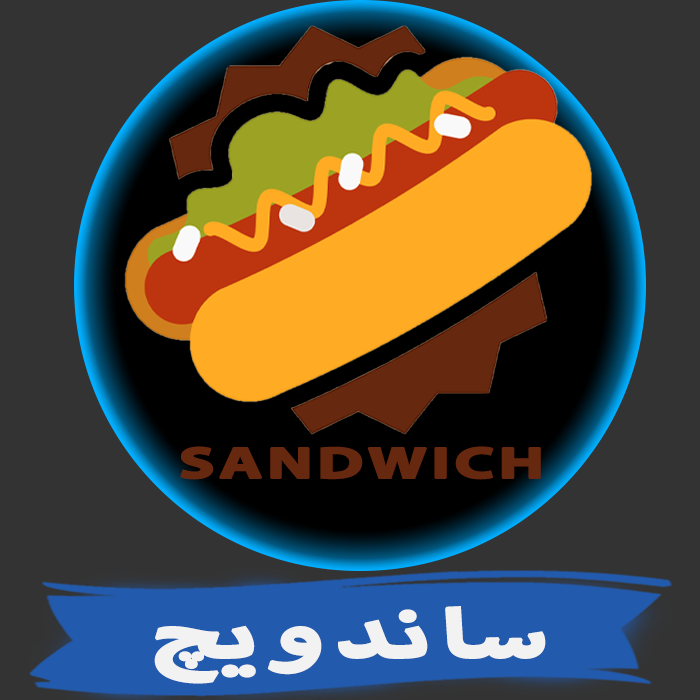
<style>
.page{position:relative;width:700px;height:700px;background:#333333}
.page>*{position:absolute;margin:0}
.t1{font:61.6px "MyriadArabic-Bold";letter-spacing:0.03em;color:#66280f;font-weight:bold;scale:1.5 1}
.t2{font:94.3px "MyriadArabic-Bold";letter-spacing:0.03em;color:#f2f2f2;font-weight:bold;scale:1.5 1}
</style>
<div class="page">
<p class="t1" style="left:180px;top:446px;width:361px;height:34px">SANDWICH</p>
<p class="t2" style="left:154px;top:606px;width:392px;height:78px">ساندویچ</p>
</div>
